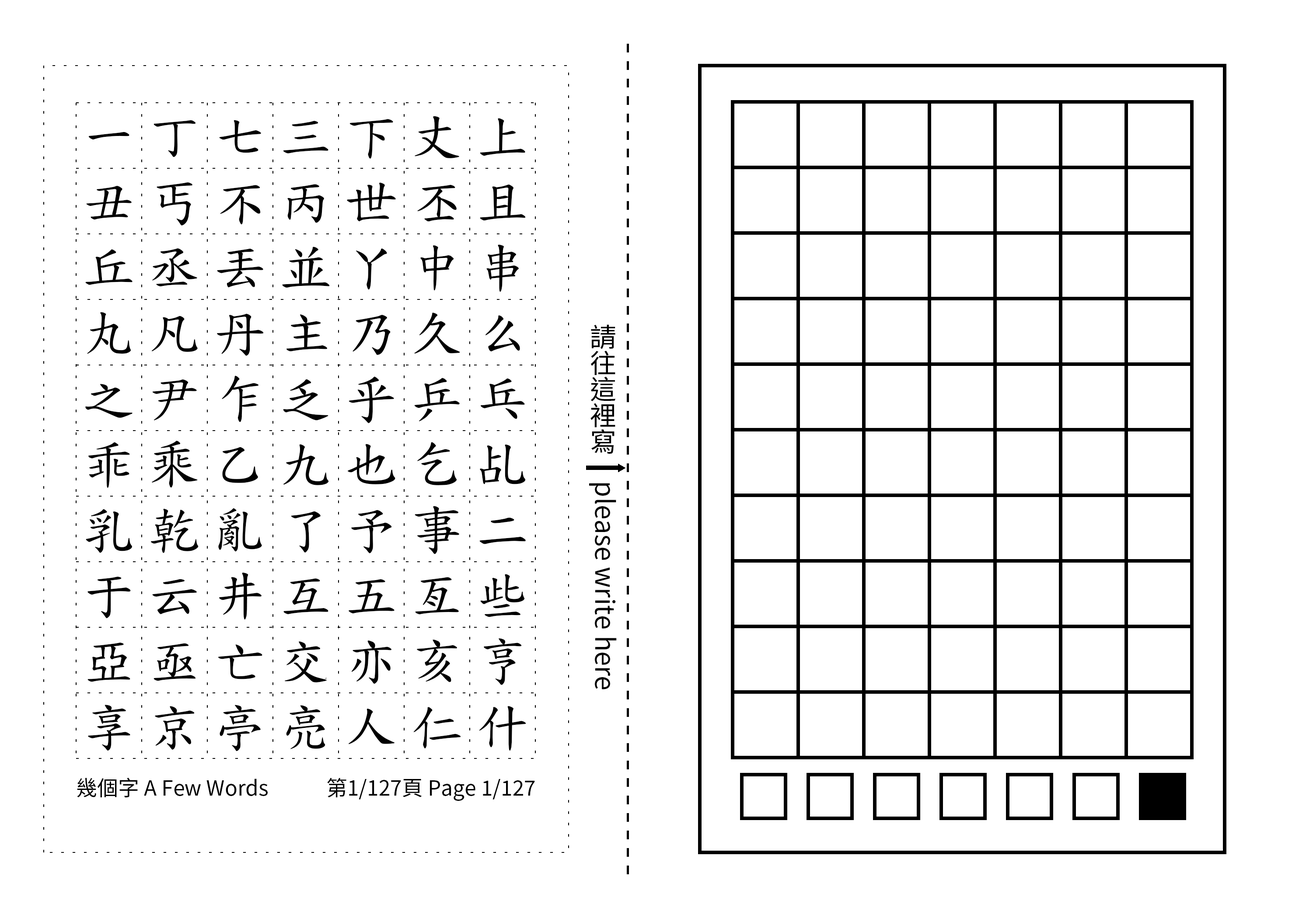
<style>
.page{position:relative;width:1299px;height:918px;background:#ffffff}
.page>*{position:absolute;margin:0}
.t1{font:52.5px/65.6px "TW-Kai-98_1";letter-spacing:0.25em;color:#000000}
.t2{font:26.2px "SourceHanSansTC-Regular";color:#000000}
.t3{font:21px "SourceHanSansTC-Regular";color:#000000}
</style>
<div class="page">
<p class="t1" style="left:85px;top:116px;width:441px;height:636px;text-align:center">一丁七三下丈上丑丐不丙世丕且丘丞丟並丫中串丸凡丹主乃久么之尹乍乏乎乒乓乖乘乙九也乞乩乳乾亂了予事二于云井互五亙些亞亟亡交亦亥亨享京亭亮人仁什</p>
<p class="t2" style="left:589px;top:324px;width:28px;height:366px;text-align:center">請往這裡寫　please write here</p>
<p class="t3" style="left:77px;top:778px;width:191px;height:20px">幾個字 A Few Words</p>
<p class="t3" style="left:327px;top:778px;width:208px;height:23px">第1/127頁 Page 1/127</p>
</div>
